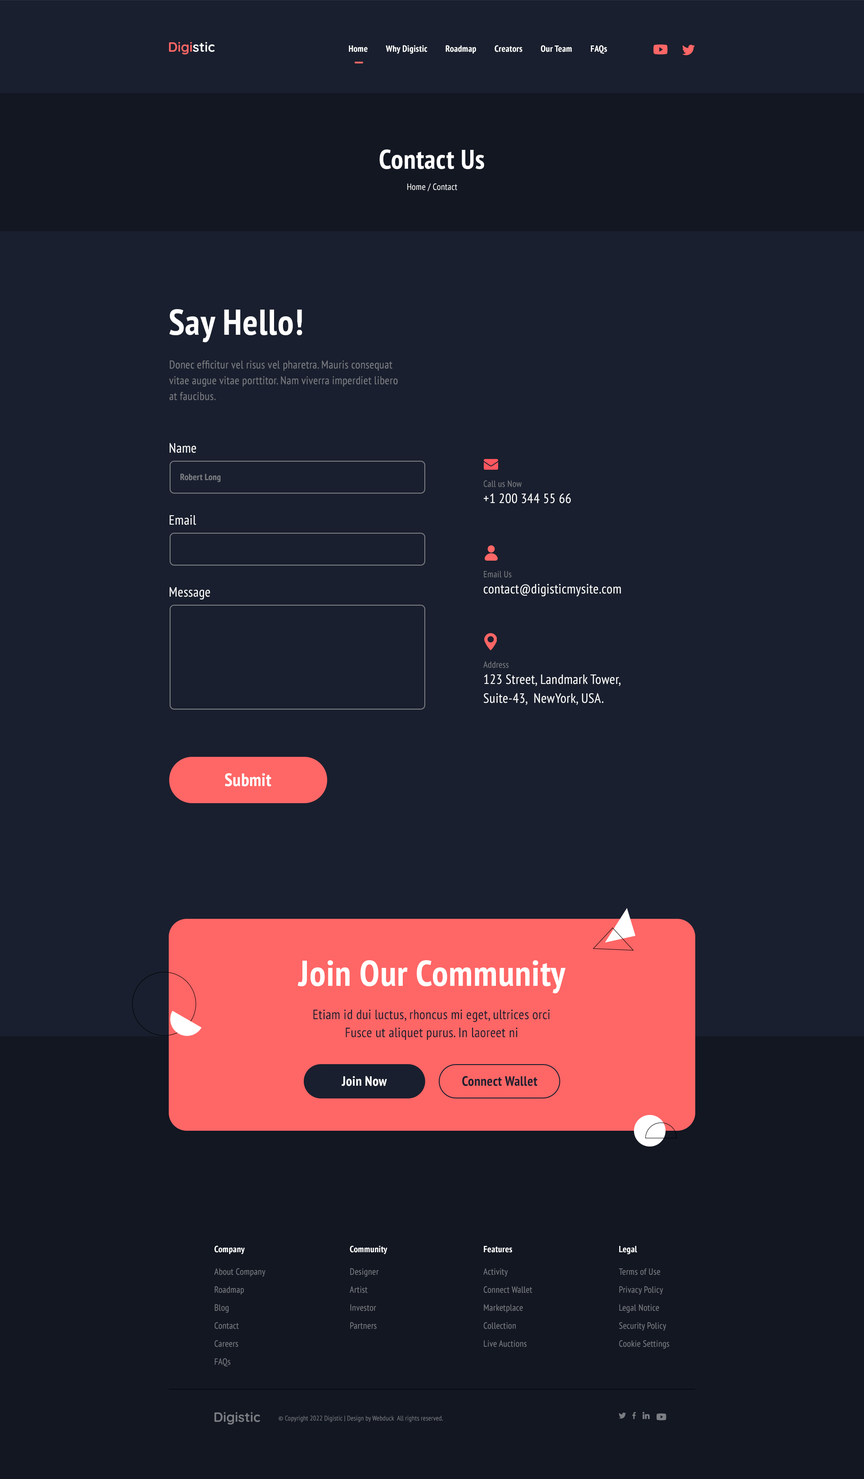
<style>
.page{position:relative;width:864px;height:1479px;background:#191f2e}
.page>*{position:absolute;margin:0}
.t1{font:9px "PTSans-NarrowBold";letter-spacing:0.02em;color:#ffffff}
.t2{font:27px "PTSans-NarrowBold";letter-spacing:0.02em;color:#ffffff}
.t3{font:9px "PTSans-Narrow";letter-spacing:0.02em;color:#ffffff}
.t4{font:36px "PTSans-NarrowBold";letter-spacing:0.02em;color:#ffffff}
.t5{font:11.2px/15.8px "PTSans-Narrow";letter-spacing:0.02em;color:#7c7e83}
.t6{font:13.5px "PTSans-Narrow";letter-spacing:0.02em;color:#ffffff}
.t7{font:9px "PTSans-NarrowBold";letter-spacing:0.02em;color:#7c7e83}
.t8{font:9px "PTSans-Narrow";letter-spacing:0.02em;color:#7c7e83}
.t9{font:13.5px/18.9px "PTSans-Narrow";letter-spacing:0.02em;color:#ffffff}
.t10{font:18px "PTSans-NarrowBold";letter-spacing:0.02em;color:#ffffff}
.t11{font:13.5px/18px "PTSans-Narrow";letter-spacing:0.02em;color:#191f2e}
.t12{font:13.5px "PTSans-NarrowBold";letter-spacing:0.02em;color:#ffffff}
.t13{font:13.5px "PTSans-NarrowBold";letter-spacing:0.02em;color:#191f2e}
.t14{font:9px/18px "PTSans-Narrow";letter-spacing:0.02em;color:#7c7e83}
.t15{font:6.8px "PTSans-Narrow";letter-spacing:0.02em;color:#7c7e83}
</style>
<div class="page">
<p class="t1" style="left:349px;top:45px;width:258px;height:9px">Home         Why Digistic         Roadmap         Creators         Our Team         FAQs</p>
<p class="t2" style="left:379px;top:149px;width:105px;height:20px">Contact Us</p>
<p class="t3" style="left:407px;top:183px;width:50px;height:8px">Home / Contact</p>
<p class="t4" style="left:169px;top:309px;width:133px;height:33px">Say Hello!</p>
<p class="t5" style="left:169px;top:360px;width:229px;height:40px">Donec efficitur vel risus vel pharetra. Mauris consequat vitae augue vitae porttitor. Nam viverra imperdiet libero at faucibus.</p>
<p class="t6" style="left:170px;top:443px;width:26px;height:10px">Name</p>
<p class="t7" style="left:180px;top:473px;width:40px;height:9px">Robert Long</p>
<p class="t8" style="left:484px;top:480px;width:38px;height:7px">Call us Now</p>
<p class="t6" style="left:484px;top:493px;width:87px;height:11px">+1 200 344 55 66</p>
<p class="t6" style="left:170px;top:515px;width:26px;height:10px">Email</p>
<p class="t8" style="left:484px;top:571px;width:28px;height:7px">Email Us</p>
<p class="t6" style="left:170px;top:587px;width:40px;height:13px">Message</p>
<p class="t6" style="left:484px;top:584px;width:137px;height:13px">contact@digisticmysite.com</p>
<p class="t8" style="left:483px;top:661px;width:25px;height:7px">Address</p>
<p class="t9" style="left:484px;top:674px;width:137px;height:31px">123 Street, Landmark Tower,<br>Suite-43,  NewYork, USA.</p>
<p class="t10" style="left:225px;top:773px;width:46px;height:14px">Submit</p>
<p class="t4" style="left:297px;top:960px;width:269px;height:34px">Join Our Community</p>
<p class="t11" style="left:313px;top:1009px;width:237px;height:31px;text-align:center">Etiam id dui luctus, rhoncus mi eget, ultrices orci<br>Fusce ut aliquet purus. In laoreet ni</p>
<p class="t12" style="left:342px;top:1076px;width:45px;height:10px">Join Now</p>
<p class="t13" style="left:462px;top:1076px;width:75px;height:10px">Connect Wallet</p>
<p class="t1" style="left:214px;top:1246px;width:31px;height:8px">Company</p>
<p class="t1" style="left:350px;top:1246px;width:37px;height:8px">Community</p>
<p class="t1" style="left:484px;top:1246px;width:28px;height:7px">Features</p>
<p class="t1" style="left:619px;top:1246px;width:18px;height:9px">Legal</p>
<p class="t14" style="left:214px;top:1268px;width:52px;height:99px">About Company<br>Roadmap<br>Blog<br>Contact<br>Careers<br>FAQs</p>
<p class="t14" style="left:350px;top:1268px;width:29px;height:61px">Designer<br>Artist<br>Investor<br>Partners</p>
<p class="t14" style="left:483px;top:1268px;width:49px;height:79px">Activity<br>Connect Wallet<br>Marketplace<br>Collection<br>Live Auctions</p>
<p class="t14" style="left:619px;top:1269px;width:50px;height:80px">Terms of Use<br>Privacy Policy<br>Legal Notice<br>Security Policy<br>Cookie Settings</p>
<p class="t15" style="left:279px;top:1416px;width:164px;height:6px">© Copyright 2022 Digistic | Design by Webduck  All rights reserved.</p>
</div>
